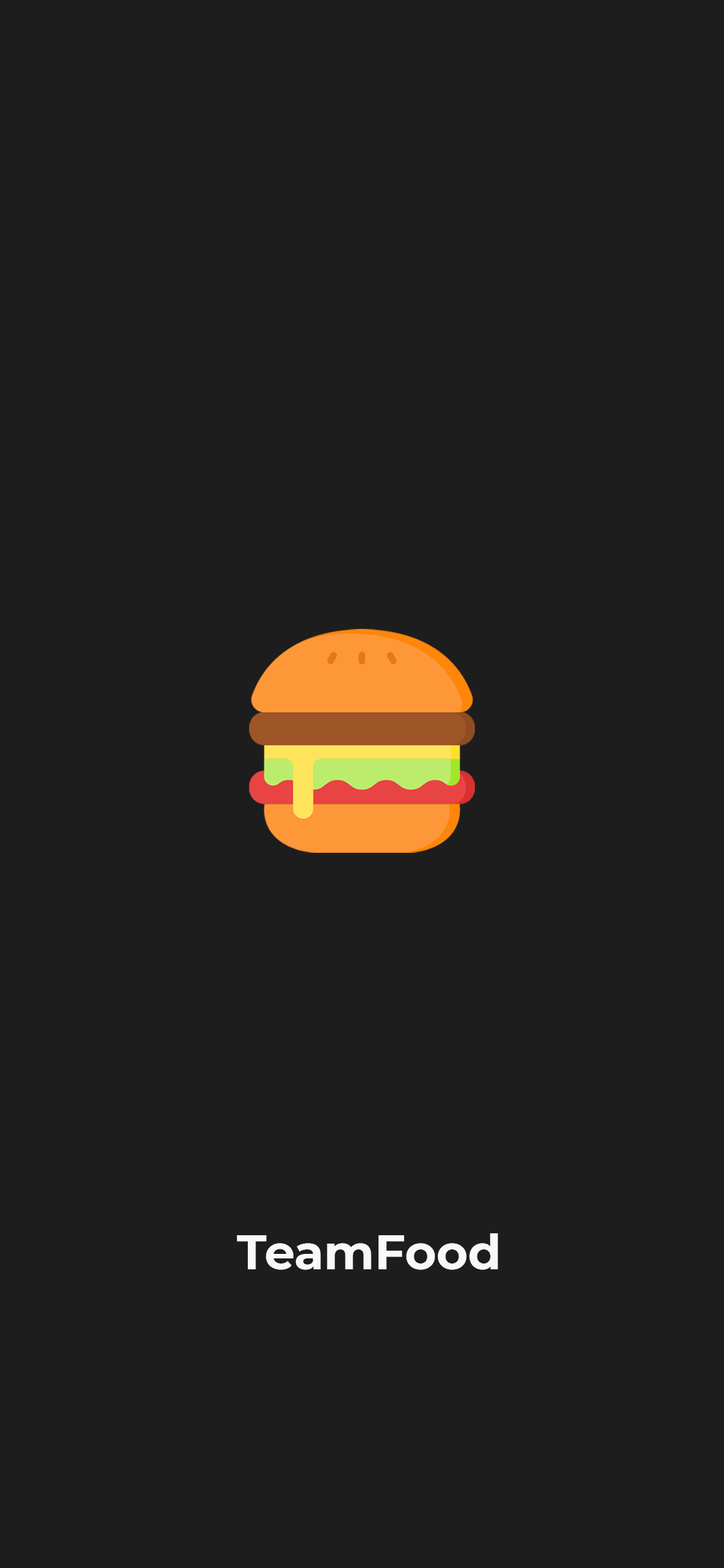
<style>
.page{position:relative;width:724px;height:1568px;background:#1d1d1d}
.page>*{position:absolute;margin:0}
.t1{font:48.3px "Montserrat-Bold";color:#f9f9f9}
</style>
<div class="page">
<p class="t1" style="left:237px;top:1233px;width:261px;height:37px">TeamFood</p>
</div>
